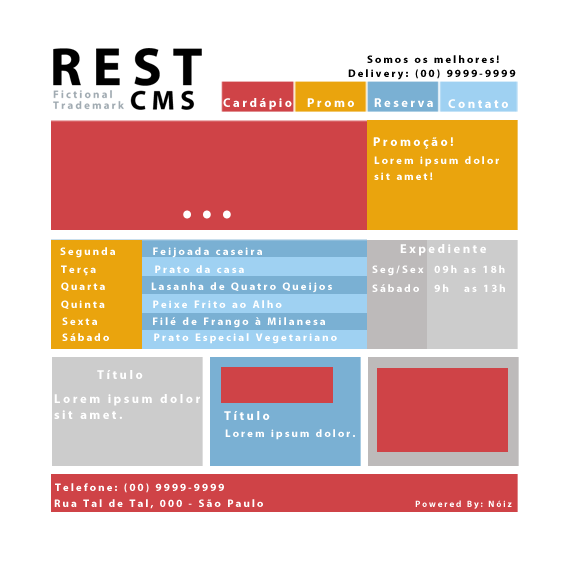
<style>
.page{position:relative;width:570px;height:569px;background:#ffffff}
.page>*{position:absolute;margin:0}
.t1{font:10.8px "MyriadPro-Bold";letter-spacing:0.2em;color:#000000}
.t2{font:12.6px "MyriadPro-Bold";letter-spacing:0.2em;color:#ffffff}
.t3{font:10.8px/8.1px "MyriadPro-Bold";letter-spacing:0.2em;color:#ffffff}
.t4{font:43.2px "MyriadPro-Bold";letter-spacing:0.2em;color:#ffffff}
.t5{font:10.8px "MyriadPro-Bold";letter-spacing:0.2em;color:#ffffff}
.t6{font:12.6px/8.1px "MyriadPro-Bold";letter-spacing:0.2em;color:#ffffff}
.t7{font:9px "MyriadPro-Bold";letter-spacing:0.2em;color:#ffffff}
</style>
<div class="page">
<p class="t1" style="left:367px;top:55px;width:132px;height:8px">Somos os melhores!</p>
<p class="t1" style="left:348px;top:69px;width:168px;height:11px">Delivery: (00) 9999-9999</p>
<p class="t2" style="left:223px;top:98px;width:69px;height:12px">Cardápio</p>
<p class="t2" style="left:307px;top:98px;width:47px;height:9px">Promo</p>
<p class="t2" style="left:374px;top:98px;width:59px;height:9px">Reserva</p>
<p class="t2" style="left:448px;top:99px;width:60px;height:9px">Contato</p>
<p class="t2" style="left:373px;top:137px;width:80px;height:12px">Promoção!</p>
<p class="t3" style="left:374px;top:156px;width:125px;height:24px">Lorem ipsum dolor<br><br>sit amet!</p>
<p class="t4" style="left:183px;top:210px;width:48px;height:9px">...</p>
<p class="t2" style="left:400px;top:244px;width:86px;height:12px">Expediente</p>
<p class="t5" style="left:60px;top:247px;width:202px;height:11px">Segunda        Feijoada caseira</p>
<p class="t5" style="left:61px;top:265px;width:183px;height:11px">Terça             Prato da casa</p>
<p class="t5" style="left:372px;top:265px;width:133px;height:11px">Seg/Sex  09h as 18h</p>
<p class="t5" style="left:61px;top:282px;width:271px;height:11px">Quarta          Lasanha de Quatro Queijos</p>
<p class="t5" style="left:372px;top:284px;width:133px;height:8px">Sábado   9h   as 13h</p>
<p class="t5" style="left:61px;top:300px;width:221px;height:9px">Quinta     Peixe Frito ao Alho</p>
<p class="t5" style="left:62px;top:317px;width:263px;height:11px">Sexta             Filé de Frango à Milanesa</p>
<p class="t5" style="left:62px;top:333px;width:275px;height:11px">Sábado     Prato Especial Vegetariano</p>
<p class="t2" style="left:97px;top:370px;width:46px;height:9px">Título</p>
<p class="t6" style="left:54px;top:394px;width:146px;height:25px">Lorem ipsum dolor<br><br>sit amet.</p>
<p class="t2" style="left:224px;top:411px;width:46px;height:9px">Título</p>
<p class="t5" style="left:225px;top:429px;width:130px;height:11px">Lorem ipsum dolor.</p>
<p class="t5" style="left:55px;top:483px;width:169px;height:10px">Telefone: (00) 9999-9999</p>
<p class="t5" style="left:54px;top:499px;width:209px;height:10px">Rua Tal de Tal, 000 - São Paulo</p>
<p class="t7" style="left:415px;top:500px;width:97px;height:9px">Powered By: Nóiz</p>
</div>
